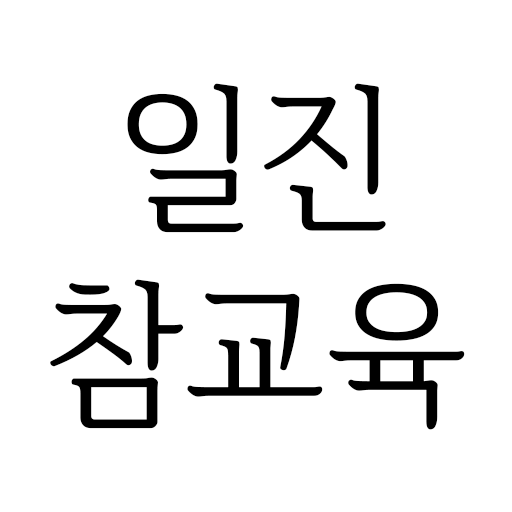
<style>
.page{position:relative;width:512px;height:512px;background:#ffffff}
.page>*{position:absolute;margin:0}
.t1{font:156.8px/196px "IropkeBatangM";color:#000000}
</style>
<div class="page">
<p class="t1" style="left:50px;top:83px;width:415px;height:347px;text-align:center">일진<br>참교육</p>
</div>
